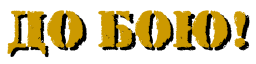
<style>
.page{position:relative;width:256px;height:64px;background:#ffffff}
.page>*{position:absolute;margin:0}
.t1{font:50.1px "AStamperRgBt";letter-spacing:0.01em;color:#cc9900}
.t2{font:50.1px "AStamperRgBt";letter-spacing:0.01em}
</style>
<div class="page">
<p class="t1" style="left:7px;top:10px;width:239px;height:45px">до бою!</p>
<p class="t2" style="left:10px;top:13px;width:240px;height:45px">до бою!</p>
</div>
